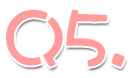
<style>
.page{position:relative;width:134px;height:78px;background:#ffffff}
.page>*{position:absolute;margin:0}
.t1{font:80px "DFWaWa-W7-HKP-BF";letter-spacing:-0.1em;color:#ff9d9d;scale:0.95 1}
</style>
<div class="page">
<p class="t1" style="left:6px;top:9px;width:119px;height:58px">Q5.</p>
</div>
